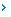
<style>
.page{position:relative;width:11px;height:17px;background:#ffffff}
.page>*{position:absolute;margin:0}
.t1{font:13px "BerlinSansFBDemi-Bold";color:#0087ca}
</style>
<div class="page">
<p class="t1" style="left:2px;top:4px;width:4px;height:7px">&gt;</p>
</div>
